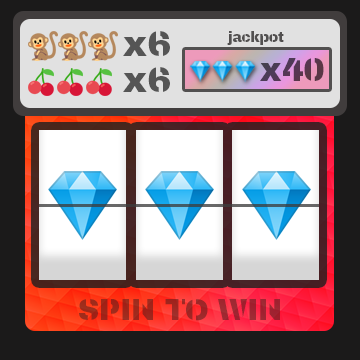
<style>
.page{position:relative;width:360px;height:360px;background:#1b1a1a}
.page>*{position:absolute;margin:0}
.t1{font:36px "Archicoco";letter-spacing:-0.01em;color:#555555}
.t2{font:14px "Archicoco";letter-spacing:-0.01em;color:#525050}
.t3{font:32.7px "Archicoco";letter-spacing:-0.01em;color:#573752}
.t4{font:29.7px "Archicoco";letter-spacing:-0.01em;color:#9f2624}
</style>
<div class="page">
<p class="t1" style="left:123px;top:31px;width:47px;height:25px">x6</p>
<p class="t2" style="left:227px;top:31px;width:57px;height:14px">jackpot</p>
<p class="t3" style="left:260px;top:58px;width:64px;height:23px">x40</p>
<p class="t1" style="left:123px;top:67px;width:47px;height:25px">x6</p>
<p class="t4" style="left:79px;top:299px;width:201px;height:22px">SPIN TO WIN</p>
</div>
